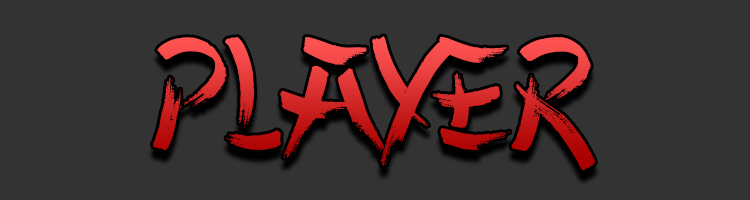
<style>
.page{position:relative;width:750px;height:200px;background:#333333}
.page>*{position:absolute;margin:0}
.t1{font:161.3px "ChineseTakeaway";scale:0.95 1}
</style>
<div class="page">
<p class="t1" style="left:153px;top:36px;width:442px;height:135px">Player</p>
</div>
